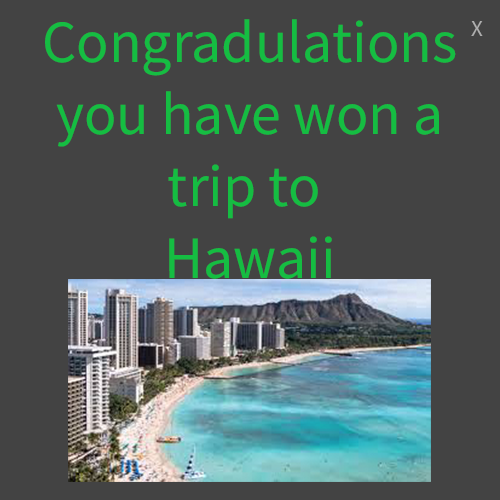
<style>
.page{position:relative;width:500px;height:500px;background:#434343}
.page>*{position:absolute;margin:0}
.t1{font:60px "SourceSansRoman-Regular";color:#15bd42}
.t2{font:23px "SourceSansRoman-Regular";color:#aeaeae}
</style>
<div class="page">
<p class="t1" style="left:45px;top:19px;width:411px;height:260px;text-align:center">Congradulations<br>you have won a<br>trip to <br>Hawaii</p>
<p class="t2" style="left:471px;top:21px;width:12px;height:15px">X</p>
</div>
